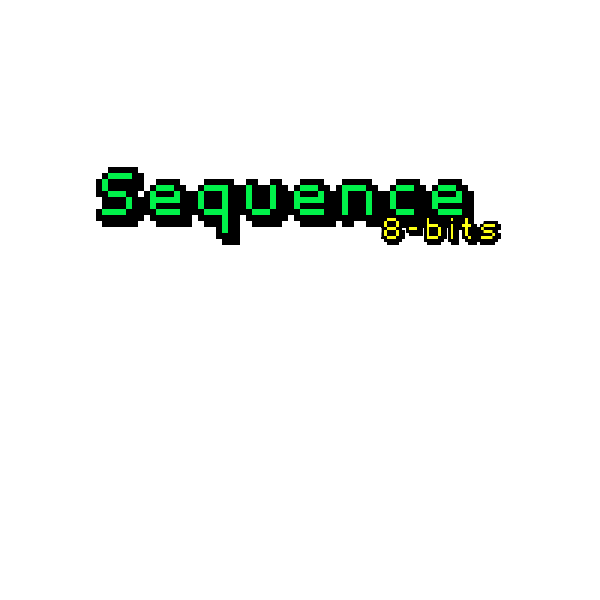
<style>
.page{position:relative;width:600px;height:600px;background:#ffffff}
.page>*{position:absolute;margin:0}
.t1{font:48px "Fipps-Regular";color:#000000}
.t2{font:24px "Fipps-Regular";color:#000000}
</style>
<div class="page">
<p class="t1" style="left:96px;top:167px;width:378px;height:78px">Sequence</p>
<p class="t2" style="left:381px;top:215px;width:120px;height:30px">8-bits</p>
</div>
